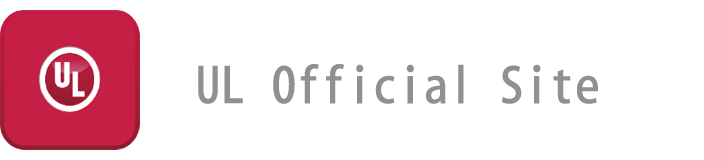
<style>
.page{position:relative;width:704px;height:160px;background:#ffffff}
.page>*{position:absolute;margin:0}
.t1{font:48px "AdobeFanHeitiStd-Bold";color:#909090;font-weight:bold}
</style>
<div class="page">
<p class="t1" style="left:198px;top:64px;width:400px;height:40px">UL Official Site</p>
</div>
